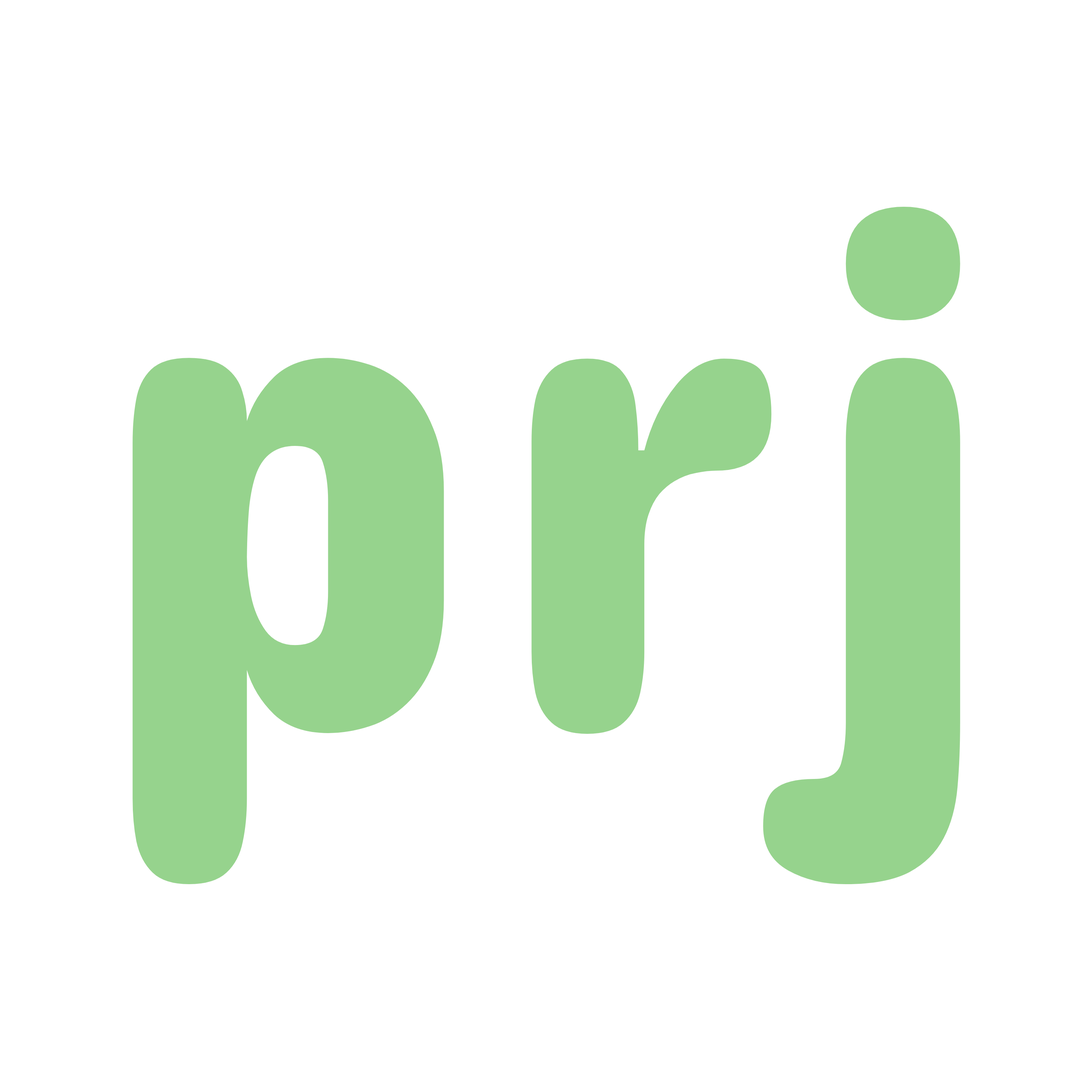
<style>
.page{position:relative;width:1092px;height:1092px;background:#ffffff}
.page>*{position:absolute;margin:0}
.t1{font:769.9px "Dangrek-Regular";color:#96d38d}
</style>
<div class="page">
<p class="t1" style="left:132px;top:207px;width:828px;height:677px">prj</p>
</div>
